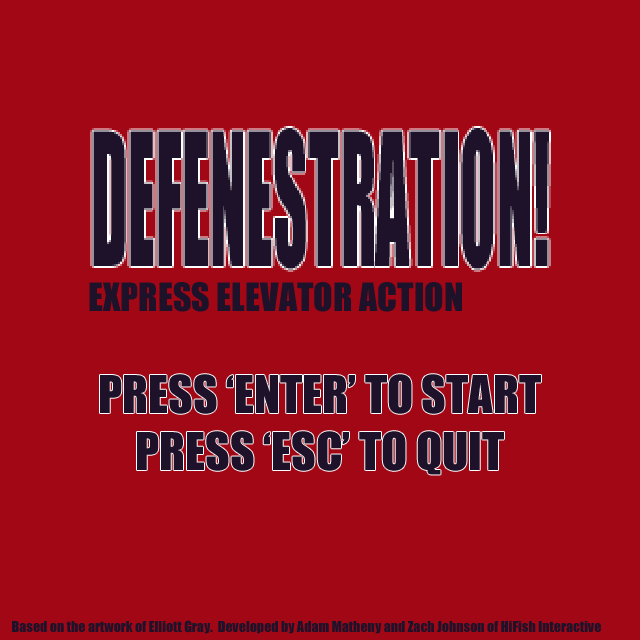
<style>
.page{position:relative;width:640px;height:640px;background:#a20715}
.page>*{position:absolute;margin:0}
.t1{font:36px "Impact";color:#1e122a}
.t2{font:48px "Impact";color:#1e122a}
.t3{font:14px "Impact";color:#1e122a}
</style>
<div class="page">
<p class="t1" style="left:89px;top:282px;width:373px;height:30px">EXPRESS ELEVATOR ACTION</p>
<p class="t2" style="left:100px;top:374px;width:441px;height:101px;text-align:center">PRESS ‘ENTER’ TO START<br>PRESS ‘ESC’ TO QUIT</p>
<p class="t3" style="left:12px;top:620px;width:589px;height:14px">Based on the artwork of Elliott Gray.  Developed by Adam Matheny and Zach Johnson of HiFish Interactive</p>
</div>
